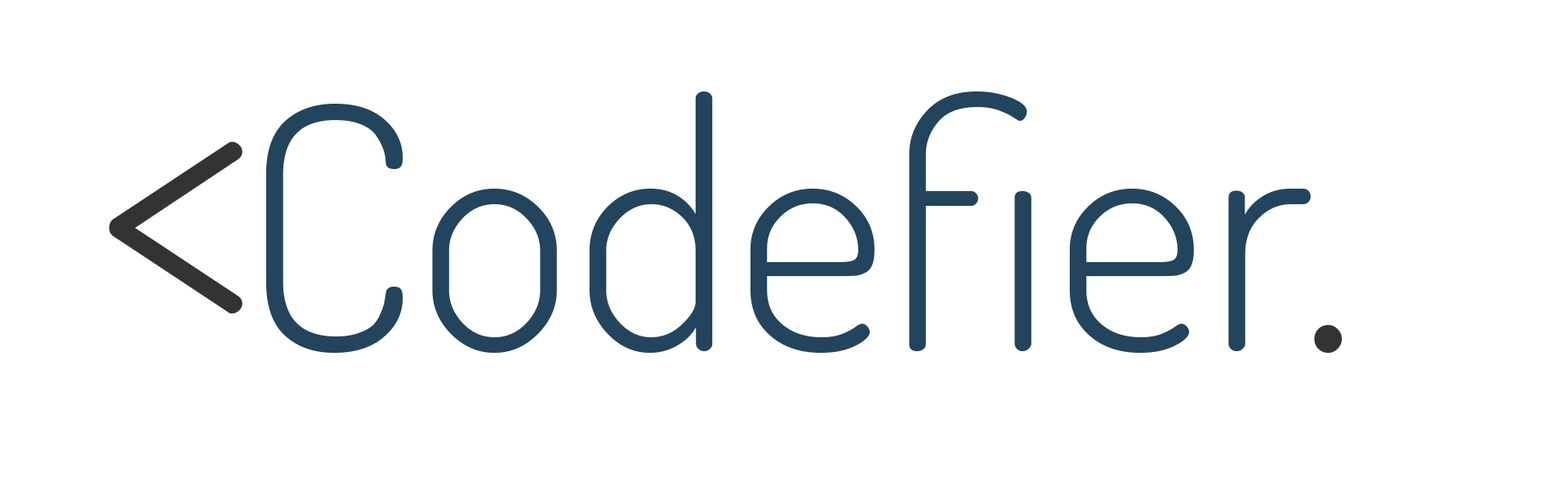
<style>
.page{position:relative;width:1568px;height:490px;background:#ffffff}
.page>*{position:absolute;margin:0}
.t1{font:339px "Dosis-Light";color:#23445d}
.t2{font:339px "Dosis-Light";color:#333333}
.t3{font:415.5px "Dosis-Light";color:#333333}
</style>
<div class="page">
<p class="t1" style="left:265px;top:91px;width:1078px;height:262px">Codefier<span class="t2">.</span></p>
<p class="t3" style="left:109px;top:141px;width:134px;height:173px">&lt;</p>
</div>
